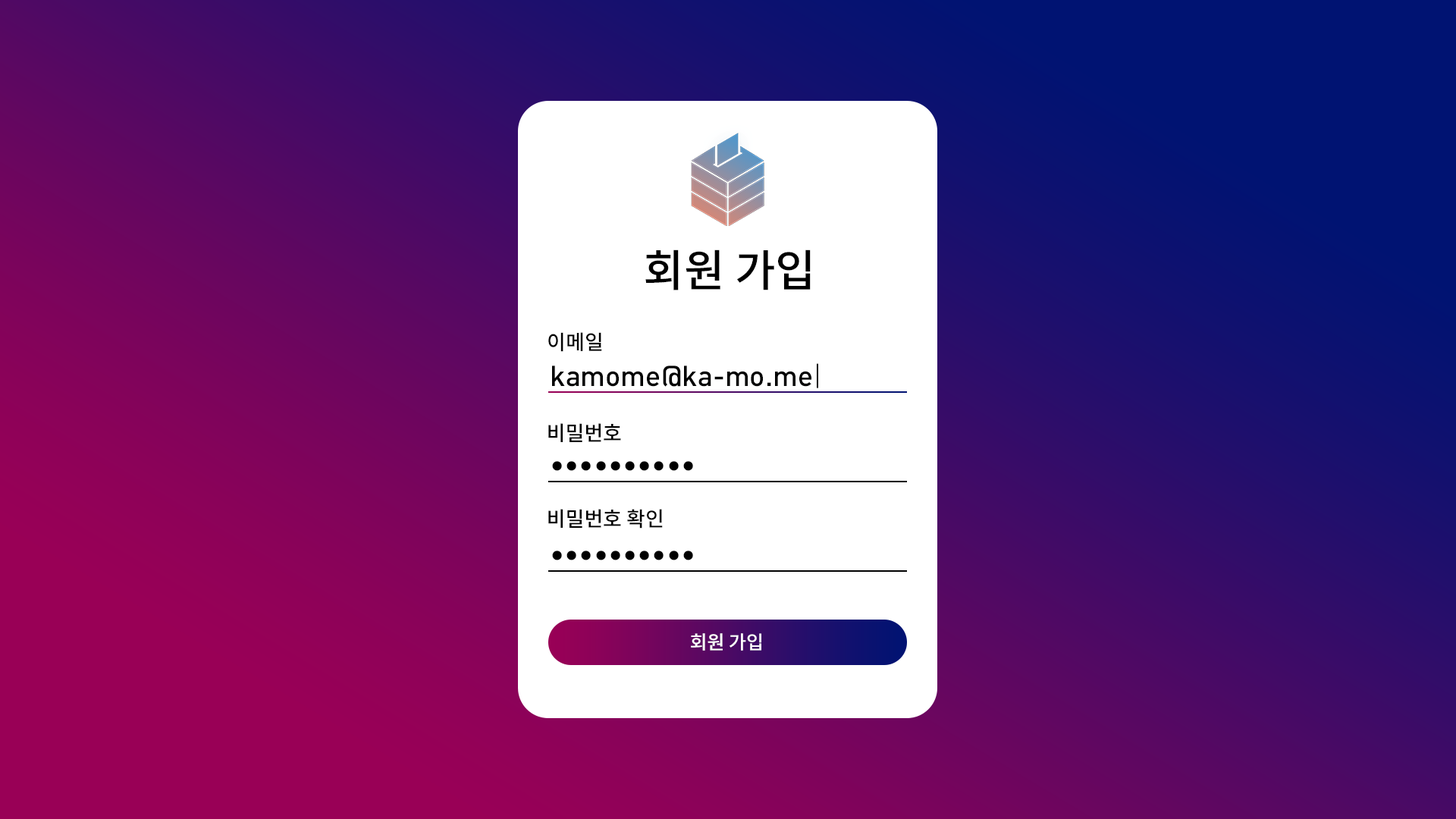
<style>
.page{position:relative;width:1456px;height:819px}
.page>*{position:absolute;margin:0}
.t1{font:44.2px "NotoSansCJKkr-Medium";color:#000000}
.t2{font:20.5px "NotoSansCJKkr-Medium";color:#000000}
.t3{font:28.4px "DIN-Medium";color:#000000}
.t4{font:28.4px "DIN-Light";color:#000000}
.t5{font:19px "NotoSansCJKkr-Medium";color:#ffffff}
</style>
<div class="page">
<p class="t1" style="left:645px;top:249px;width:166px;height:41px">회원 가입</p>
<p class="t2" style="left:548px;top:332px;width:54px;height:20px">이메일</p>
<p class="t3" style="left:552px;top:363px;width:266px;height:25px">kamome@ka-mo.me<span class="t4">|</span></p>
<p class="t2" style="left:548px;top:423px;width:73px;height:19px">비밀번호</p>
<p class="t3" style="left:552px;top:461px;width:141px;height:10px">••••••••••</p>
<p class="t2" style="left:548px;top:509px;width:115px;height:20px">비밀번호 확인</p>
<p class="t3" style="left:552px;top:551px;width:141px;height:9px">••••••••••</p>
<p class="t5" style="left:691px;top:633px;width:70px;height:18px">회원 가입</p>
</div>
